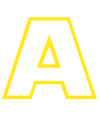
<style>
.page{position:relative;width:100px;height:116px;background:#ffffff}
.page>*{position:absolute;margin:0}
.t1{font:116px "StarJediHollow";color:#ffe81f}
</style>
<div class="page">
<p class="t1" style="left:2px;top:17px;width:95px;height:82px">a</p>
</div>
